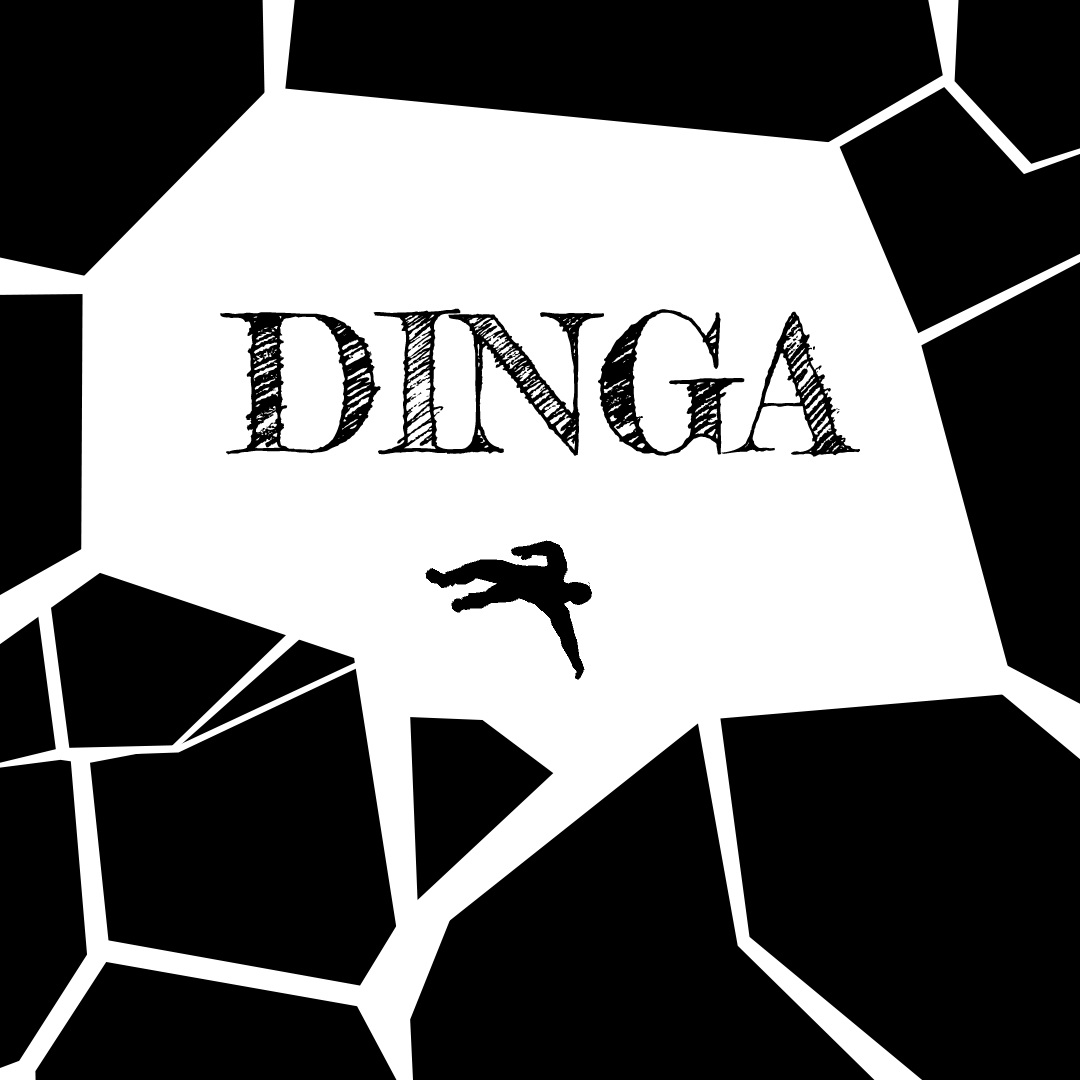
<style>
.page{position:relative;width:1080px;height:1080px;background:#000000}
.page>*{position:absolute;margin:0}
.t1{font:190px "FrederickatheGreat-Regular";color:#000000}
</style>
<div class="page">
<p class="t1" style="left:220px;top:308px;width:640px;height:149px">DINGA</p>
</div>
